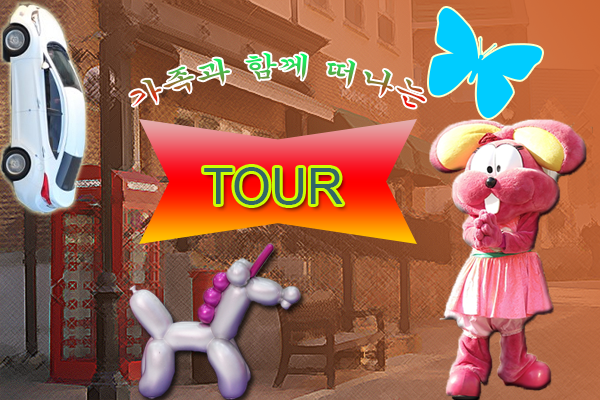
<style>
.page{position:relative;width:600px;height:400px}
.page>*{position:absolute;margin:0}
.t1{font:27.5px "Gungsuh"}
.t2{font:50px "ArialMT";color:#336666}
</style>
<div class="page">
<p class="t1" style="left:130px;top:53px;width:296px;height:55px;text-align:center">가족과 함께 떠나는</p>
<p class="t2" style="left:204px;top:167px;width:139px;height:38px">TOUR</p>
</div>
